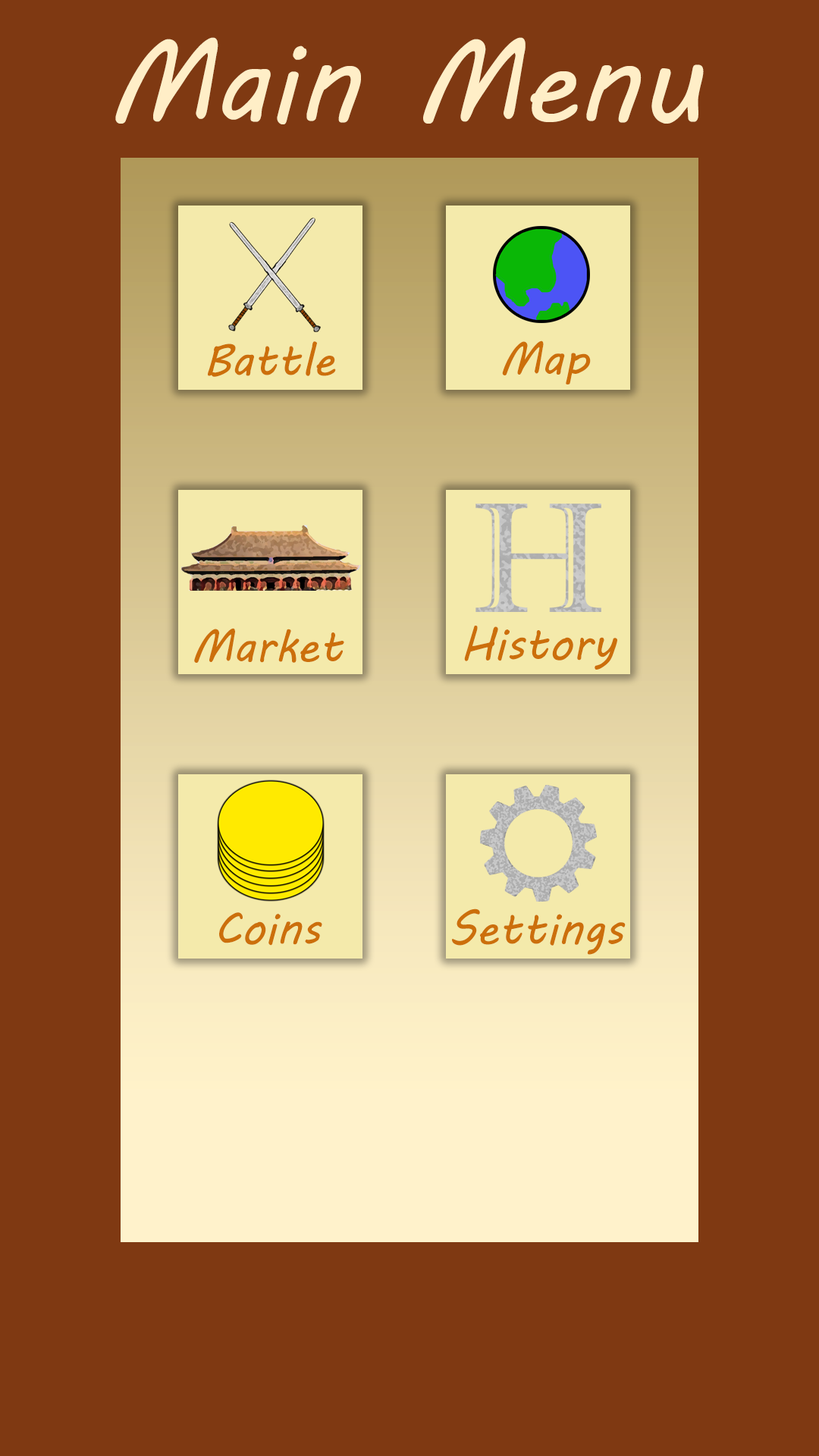
<style>
.page{position:relative;width:819px;height:1456px;background:#7f3912}
.page>*{position:absolute;margin:0}
.t1{font:113.7px "MVBoli";color:#ffeec7}
.t2{font:45.5px "MVBoli";color:#cc6f0b}
</style>
<div class="page">
<p class="t1" style="left:115px;top:37px;width:589px;height:87px">Main Menu</p>
<p class="t2" style="left:208px;top:341px;width:128px;height:36px">Battle</p>
<p class="t2" style="left:502px;top:340px;width:89px;height:44px">Map</p>
<p class="t2" style="left:194px;top:628px;width:150px;height:35px">Market</p>
<p class="t2" style="left:464px;top:626px;width:153px;height:44px">History</p>
<p class="t2" style="left:219px;top:912px;width:103px;height:34px">Coins</p>
<p class="t2" style="left:452px;top:908px;width:174px;height:47px">Settings</p>
</div>
